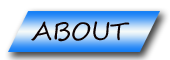
<style>
.page{position:relative;width:170px;height:60px;background:#ffffff}
.page>*{position:absolute;margin:0}
.t1{font:25px "SegoeScript";color:#0f0303}
</style>
<div class="page">
<p class="t1" style="left:31px;top:21px;width:99px;height:21px">ABOUT</p>
</div>
